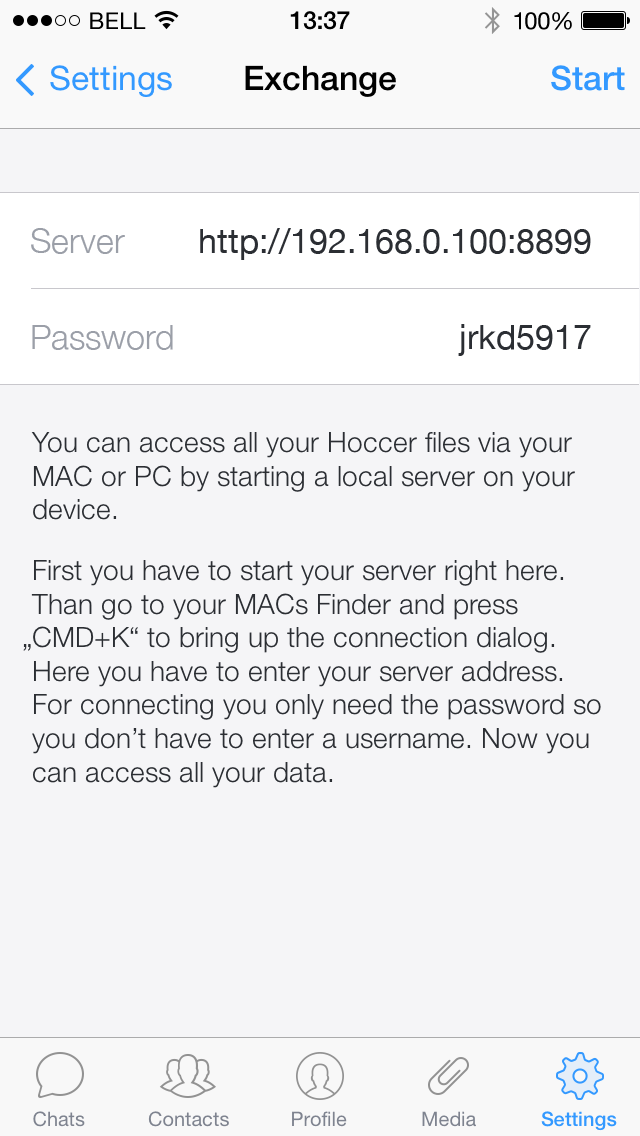
<style>
.page{position:relative;width:640px;height:1136px;background:#f5f5f7}
.page>*{position:absolute;margin:0}
.t1{font:33.8px "HelveticaNeue";color:#3399ff}
.t2{font:33.8px "HelveticaNeue-Medium";color:#000000}
.t3{font:33.8px "HelveticaNeue-Medium";color:#3399ff}
.t4{font:34px "HelveticaNeue-Light";color:#9b9fa8}
.t5{font:34px "HelveticaNeue";color:#2b2e33}
.t6{font:28px "HelveticaNeue-Light";color:#2b2e33}
</style>
<div class="page">
<p class="t1" style="left:50px;top:65px;width:122px;height:32px">Settings</p>
<p class="t2" style="left:245px;top:65px;width:151px;height:32px">Exchange</p>
<p class="t3" style="left:551px;top:65px;width:74px;height:26px">Start</p>
<p class="t4" style="left:31px;top:228px;width:94px;height:26px">Server</p>
<p class="t5" style="left:200px;top:228px;width:391px;height:32px">http://192.168.0.100:8899</p>
<p class="t4" style="left:32px;top:325px;width:141px;height:25px">Password</p>
<p class="t5" style="left:458px;top:324px;width:133px;height:32px">jrkd5917</p>
<p class="t6" style="left:31px;top:432px;width:544px;height:88px">You can access all your Hoccer files via your MAC or PC by starting a local server on your device.</p>
<p class="t6" style="left:23px;top:560px;width:578px;height:228px">First you have to start your server right here. Than go to your MACs Finder and press „CMD+K“ to bring up the connection dialog. Here you have to enter your server address. For connecting you only need the password so you don’t have to enter a username. Now you can access all your data.</p>
</div>
